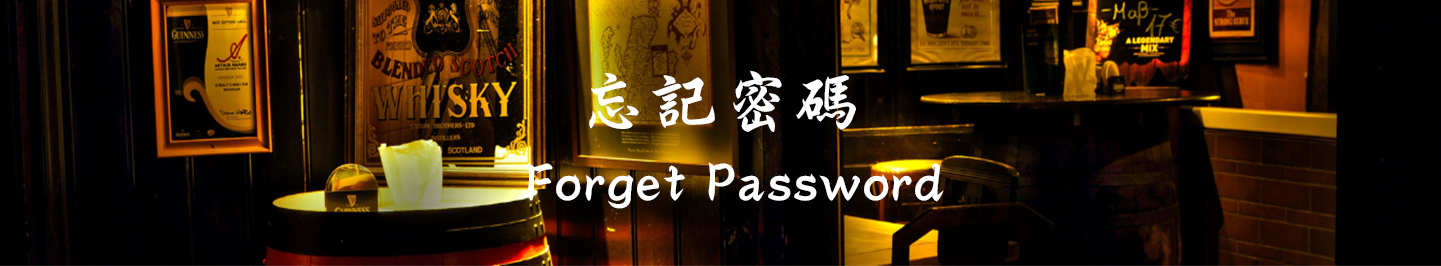
<style>
.page{position:relative;width:1441px;height:266px}
.page>*{position:absolute;margin:0}
.t1{font:72px "DFXingKai-W5-WINP-BF";color:#ffffff}
.t2{font:60px "DFXingKai-W5-WINP-BF";color:#ffffff}
</style>
<div class="page">
<p class="t1" style="left:589px;top:70px;width:267px;height:62px">忘記密碼</p>
<p class="t2" style="left:527px;top:162px;width:417px;height:47px">Forget Password</p>
</div>
